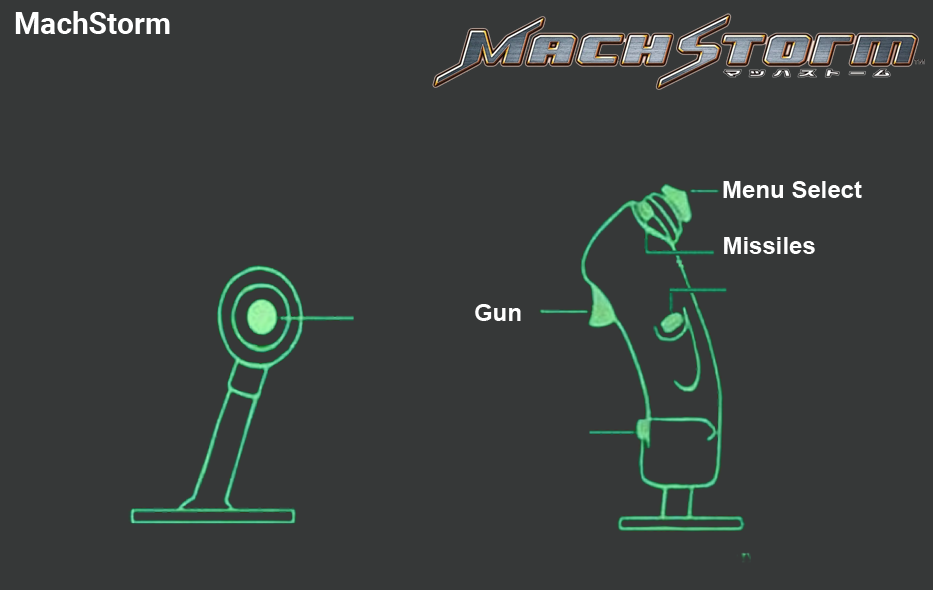
<style>
.page{position:relative;width:933px;height:590px;background:#363838}
.page>*{position:absolute;margin:0}
.t1{font:30px "Roboto-Bold";color:#ffffff}
.t2{font:24px "Arial-BoldMT";color:#fefefe}
</style>
<div class="page">
<p class="t1" style="left:15px;top:11px;width:155px;height:23px">MachStorm</p>
<p class="t2" style="left:723px;top:181px;width:139px;height:17px">Menu Select</p>
<p class="t2" style="left:724px;top:237px;width:91px;height:17px">Missiles</p>
<p class="t2" style="left:475px;top:304px;width:46px;height:17px">Gun</p>
</div>
